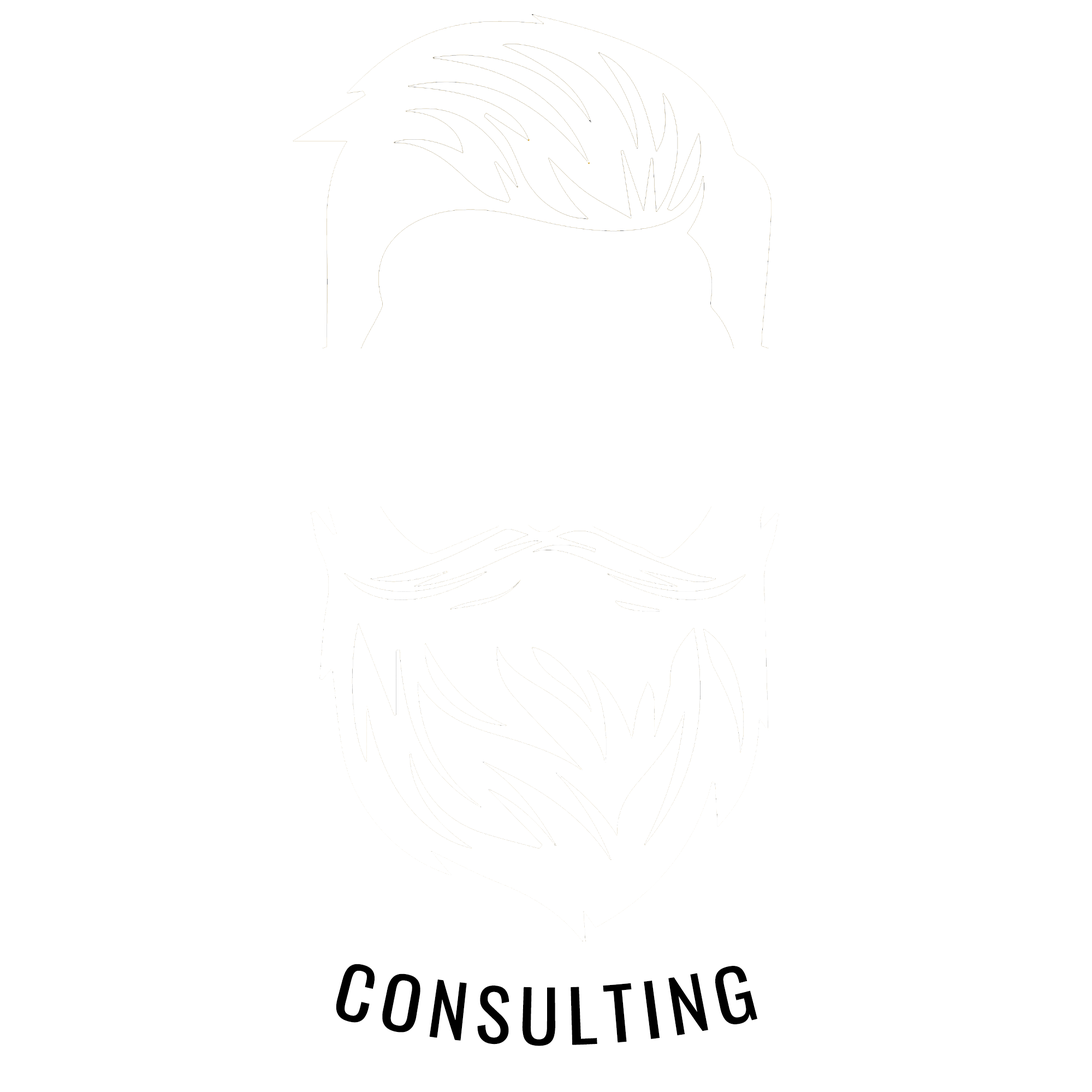
<style>
.page{position:relative;width:1092px;height:1092px;background:#ffffff}
.page>*{position:absolute;margin:0}
.t1{font:71px "Oswald-Regular";letter-spacing:0.1em;color:#000000;text-transform:uppercase}
</style>
<div class="page">
<p class="t1" style="left:336px;top:964px;width:421px;height:82px">CONSULTING</p>
</div>
